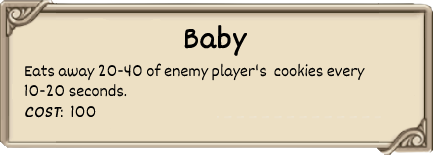
<style>
.page{position:relative;width:433px;height:155px;background:#ede0c4}
.page>*{position:absolute;margin:0}
.t1{font:32px "Dekko";color:#000000;font-weight:bold}
.t2{font:17px "Dekko";color:#000000}
.t3{font:17px "Dekko";color:#000000;font-weight:bold;font-style:italic}
</style>
<div class="page">
<p class="t1" style="left:184px;top:25px;width:64px;height:31px">Baby</p>
<p class="t2" style="left:24px;top:63px;width:341px;height:55px">Eats away 20-40 of enemy player's  cookies every<br>10-20 seconds.<br><span class="t3">COST</span>:  100</p>
</div>
